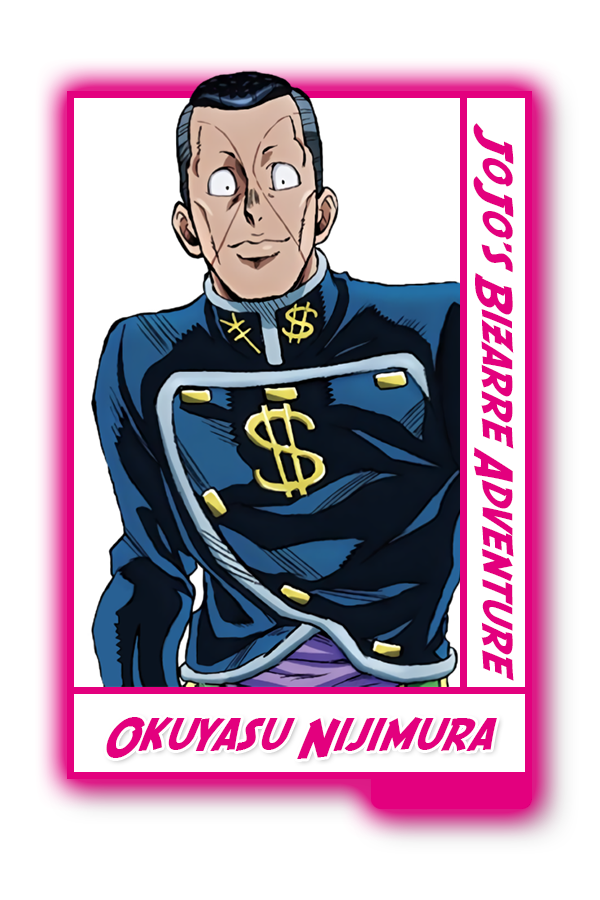
<style>
.page{position:relative;width:600px;height:900px;background:#ffffff}
.page>*{position:absolute;margin:0}
.t1{font:42.4px "SFFedora";color:#e3007e}
.t2{font:45.6px "SFFedora";color:#e3007e}
</style>
<div class="page">
<p class="t1" style="left:473px;top:123px;width:41px;height:558px;rotate:90deg">JoJo's Bizarre Adventure</p>
<p class="t2" style="left:106px;top:717px;width:391px;height:42px">Okuyasu Nijimura</p>
</div>
